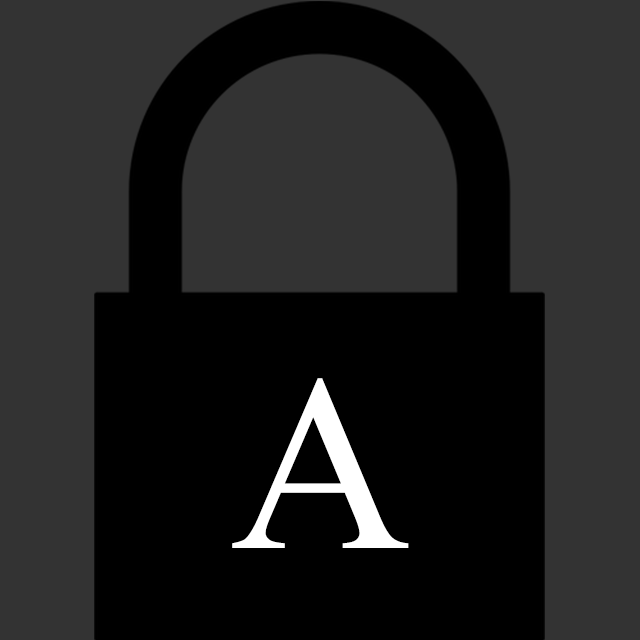
<style>
.page{position:relative;width:640px;height:640px;background:#333333}
.page>*{position:absolute;margin:0}
.t1{font:250px "TimesNewRomanPSMT";color:#ffffff}
</style>
<div class="page">
<p class="t1" style="left:232px;top:378px;width:177px;height:170px">A</p>
</div>
